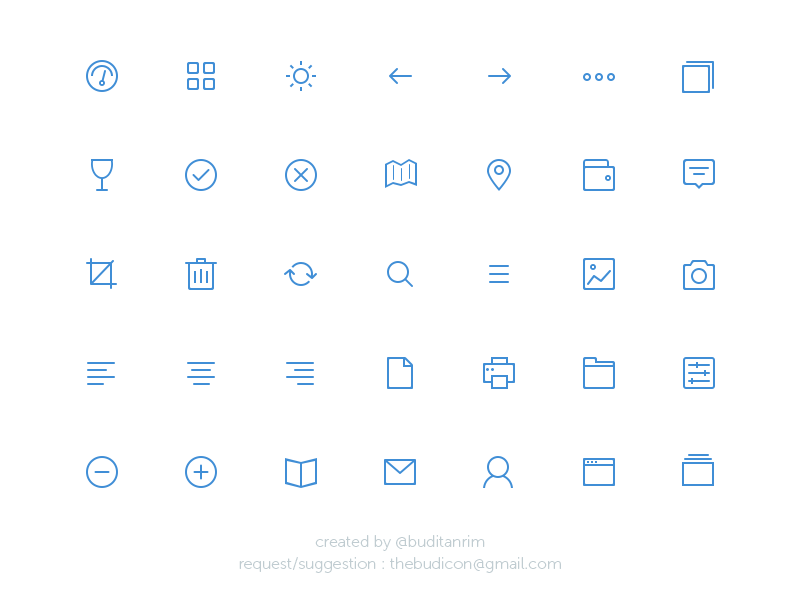
<style>
.page{position:relative;width:800px;height:600px;background:#ffffff}
.page>*{position:absolute;margin:0}
.t1{font:16px/22px "MuseoSans-100";color:#c0ccd1}
</style>
<div class="page">
<p class="t1" style="left:239px;top:535px;width:322px;height:38px;text-align:center">created by @buditanrim<br>request/suggestion : thebudicon@gmail.com</p>
</div>
